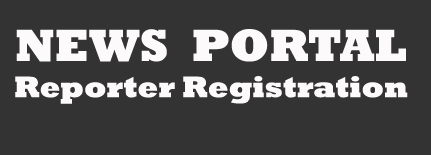
<style>
.page{position:relative;width:431px;height:155px;background:#333333}
.page>*{position:absolute;margin:0}
.t1{font:30px "Rockwell-ExtraBold";color:#fcfafa}
.t2{font:46px "Rockwell-ExtraBold";color:#fcfafa}
</style>
<div class="page">
<p class="t1" style="left:15px;top:29px;width:393px;height:75px;text-align:center"><span class="t2">NEWS  PORTAL<br></span>Reporter Registration</p>
</div>
